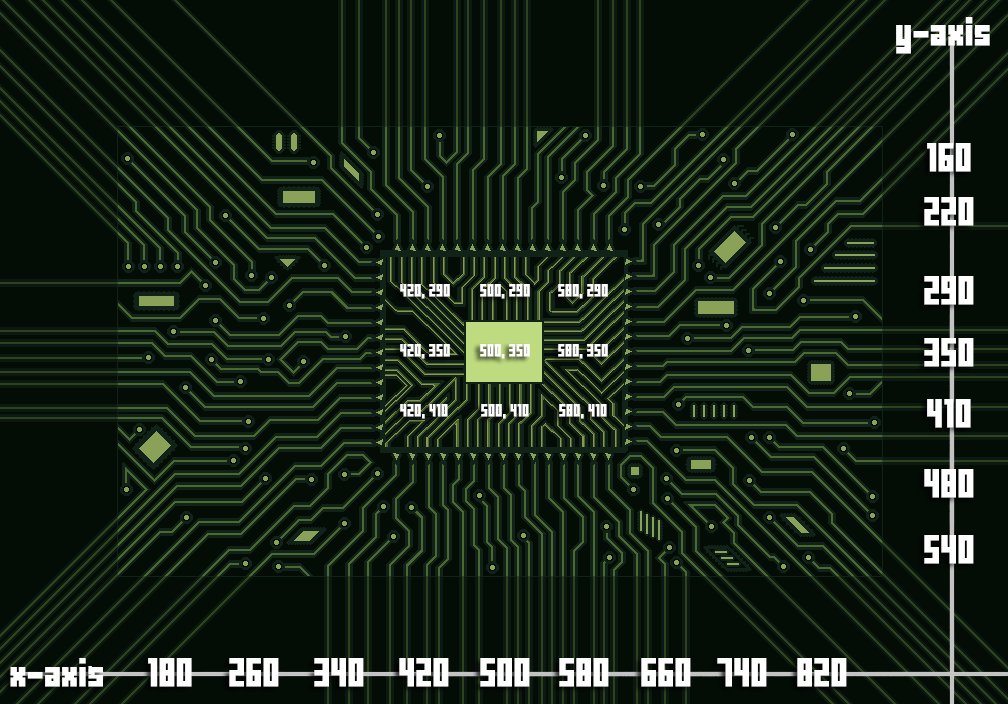
<style>
.page{position:relative;width:1008px;height:704px;background:#040c06}
.page>*{position:absolute;margin:0}
.t1{font:22.4px "FFFForward";color:#fefefe;font-weight:bold}
.t2{font:9.1px "FFFForward";color:#ffffff;font-weight:bold}
</style>
<div class="page">
<p class="t1" style="left:896px;top:17px;width:94px;height:37px">y-axis</p>
<p class="t1" style="left:927px;top:143px;width:44px;height:29px">160</p>
<p class="t1" style="left:924px;top:197px;width:50px;height:29px">220</p>
<p class="t1" style="left:924px;top:276px;width:50px;height:29px">290</p>
<p class="t2" style="left:400px;top:284px;width:50px;height:15px">420, 290</p>
<p class="t2" style="left:480px;top:284px;width:50px;height:15px">500, 290</p>
<p class="t2" style="left:558px;top:284px;width:50px;height:15px">580, 290</p>
<p class="t1" style="left:924px;top:338px;width:50px;height:29px">350</p>
<p class="t2" style="left:400px;top:344px;width:50px;height:15px">420, 350</p>
<p class="t2" style="left:480px;top:344px;width:50px;height:15px">500, 350</p>
<p class="t2" style="left:558px;top:344px;width:50px;height:15px">580, 350</p>
<p class="t1" style="left:927px;top:399px;width:44px;height:29px">410</p>
<p class="t2" style="left:400px;top:404px;width:48px;height:15px">420, 410</p>
<p class="t2" style="left:481px;top:404px;width:48px;height:15px">500, 410</p>
<p class="t2" style="left:559px;top:404px;width:48px;height:15px">580, 410</p>
<p class="t1" style="left:924px;top:469px;width:50px;height:29px">480</p>
<p class="t1" style="left:924px;top:535px;width:50px;height:29px">540</p>
<p class="t1" style="left:10px;top:658px;width:93px;height:29px">x-axis</p>
<p class="t1" style="left:148px;top:658px;width:44px;height:29px">180</p>
<p class="t1" style="left:229px;top:658px;width:50px;height:29px">260</p>
<p class="t1" style="left:314px;top:658px;width:50px;height:29px">340</p>
<p class="t1" style="left:399px;top:658px;width:50px;height:29px">420</p>
<p class="t1" style="left:480px;top:658px;width:50px;height:29px">500</p>
<p class="t1" style="left:559px;top:658px;width:50px;height:29px">580</p>
<p class="t1" style="left:641px;top:658px;width:50px;height:29px">660</p>
<p class="t1" style="left:717px;top:658px;width:50px;height:29px">740</p>
<p class="t1" style="left:797px;top:658px;width:50px;height:29px">820</p>
</div>
